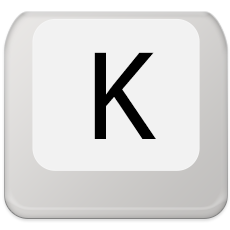
<style>
.page{position:relative;width:230px;height:230px;background:#f2f2f2}
.page>*{position:absolute;margin:0}
.t1{font:128px "MyriadPro-Regular";color:#000000}
</style>
<div class="page">
<p class="t1" style="left:94px;top:52px;width:62px;height:87px">K</p>
</div>
